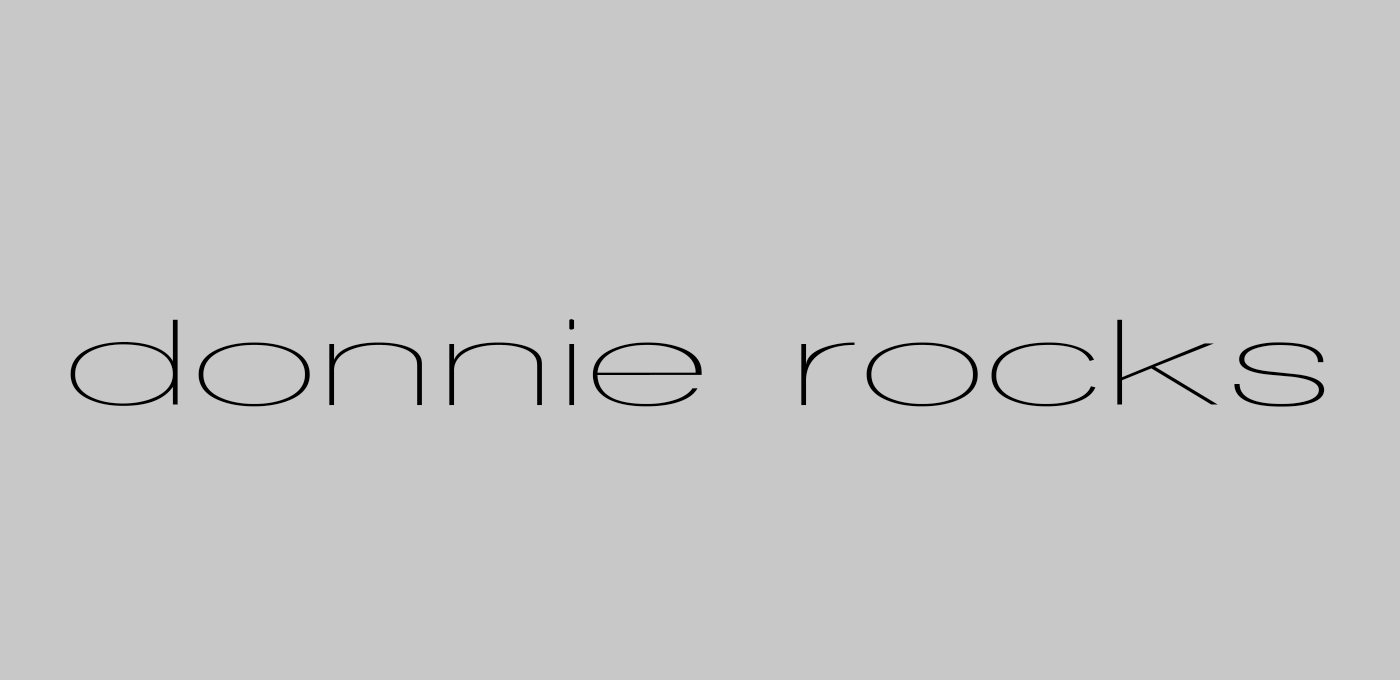
<style>
.page{position:relative;width:1400px;height:680px;background:#c9c8c8}
.page>*{position:absolute;margin:0}
.t1{font:125px "WalkwayUltraExpand";color:#000000}
</style>
<div class="page">
<p class="t1" style="left:70px;top:319px;width:1255px;height:88px">donnie rocks</p>
</div>
